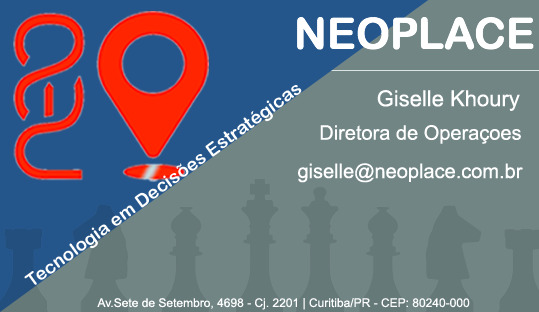
<style>
.page{position:relative;width:539px;height:312px;background:#718585}
.page>*{position:absolute;margin:0}
.t1{font:18.5px "ArialRoundedMTBold";color:#ffffff}
.t2{font:22px "ArialMT";color:#ffffff}
.t3{font:20px "ArialMT";color:#ffffff}
.t4{font:12px "ArialMT";color:#ffffff}
</style>
<div class="page">
<p class="t1" style="left:24px;top:85px;width:278px;height:200px;rotate:-36deg">Tecnologia em Decisões Estratégicas</p>
<p class="t2" style="left:377px;top:90px;width:143px;height:21px">Giselle Khoury</p>
<p class="t3" style="left:320px;top:125px;width:201px;height:19px">Diretora de Operaçoes</p>
<p class="t3" style="left:298px;top:163px;width:225px;height:20px">giselle@neoplace.com.br</p>
<p class="t4" style="left:97px;top:298px;width:373px;height:12px">Av.Sete de Setembro, 4698 - Cj. 2201 | Curitiba/PR - CEP: 80240-000</p>
</div>
